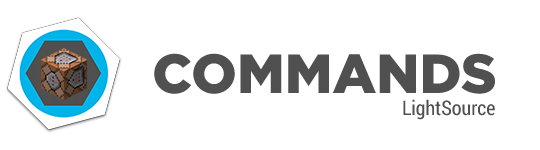
<style>
.page{position:relative;width:540px;height:150px;background:#ffffff}
.page>*{position:absolute;margin:0}
.t1{font:55px "GothamPro-Black";color:#505050}
.t2{font:20px "RobotoCondensed-Regular";color:#505050}
</style>
<div class="page">
<p class="t1" style="left:154px;top:53px;width:341px;height:41px">COMMANDS</p>
<p class="t2" style="left:403px;top:99px;width:92px;height:21px">LightSource</p>
</div>
